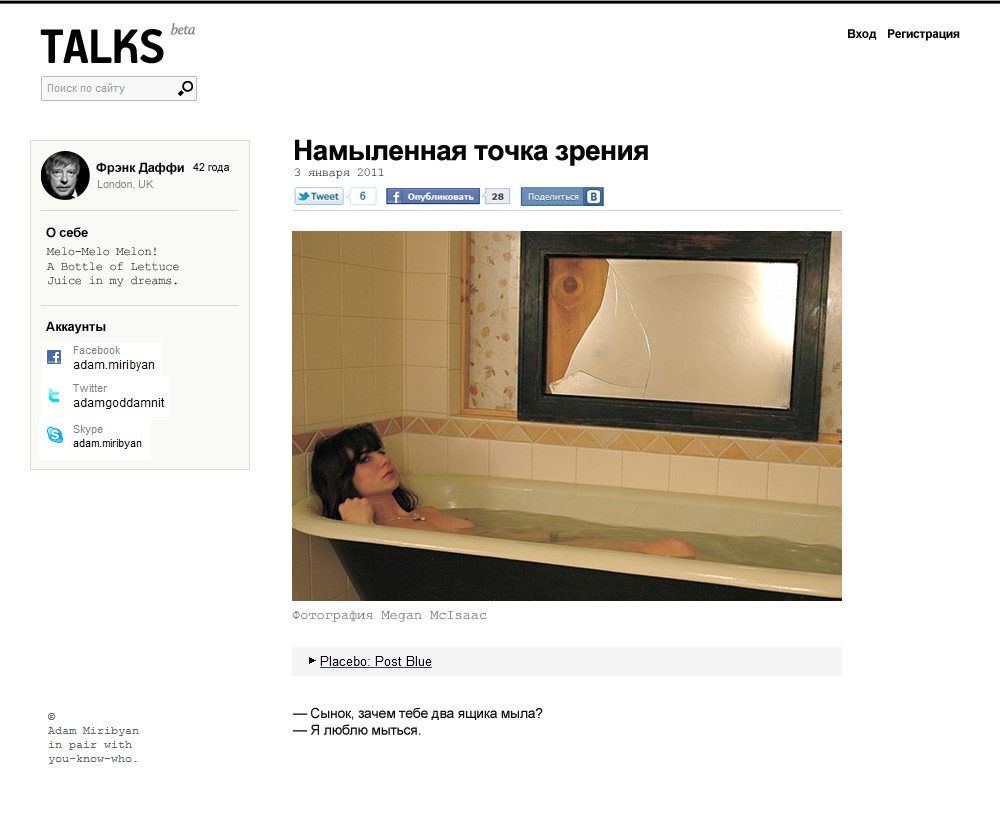
<style>
.page{position:relative;width:1000px;height:814px;background:#ffffff}
.page>*{position:absolute;margin:0}
.t1{font:54.1px "PFHandbookPro-Bold";letter-spacing:-0.02em;color:#010101}
.t2{font:15.1px "Calluna-It";letter-spacing:-0.02em;color:#888888}
.t3{font:12px "Arial-BoldMT";letter-spacing:-0.02em;color:#000000}
.t4{font:28px "Arial-BoldMT";letter-spacing:-0.02em;color:#060606}
.t5{font:13px "Arial-BoldMT";letter-spacing:-0.02em;color:#060606}
.t6{font:11px "ArialMT";letter-spacing:-0.02em;color:#060606}
.t7{font:12px "CourierNewPSMT";letter-spacing:-0.02em}
.t8{font:11px "ArialMT";letter-spacing:-0.02em;color:#888888}
.t9{font:13px "Arial-BoldMT";letter-spacing:-0.02em;color:#000000}
.t10{font:12px "CourierNewPSMT";letter-spacing:-0.02em;color:#000000}
.t11{font:14px "CourierNewPSMT";letter-spacing:-0.02em;color:#888888}
.t12{font:14px "ArialMT";letter-spacing:-0.02em;color:#070707}
</style>
<div class="page">
<p class="t1" style="left:40px;top:29px;width:124px;height:35px">TALKS</p>
<p class="t2" style="left:171px;top:23px;width:24px;height:12px">beta</p>
<p class="t3" style="left:848px;top:29px;width:29px;height:11px">Вход</p>
<p class="t3" style="left:888px;top:29px;width:72px;height:12px">Регистрация</p>
<p class="t4" style="left:295px;top:139px;width:353px;height:27px">Намыленная точка зрения</p>
<p class="t5" style="left:96px;top:162px;width:88px;height:13px">Фрэнк Даффи</p>
<p class="t6" style="left:193px;top:163px;width:36px;height:10px">42 года</p>
<p class="t7" style="left:295px;top:168px;width:89px;height:11px">3 января 2011</p>
<p class="t8" style="left:98px;top:180px;width:56px;height:10px">London, UK</p>
<p class="t9" style="left:46px;top:227px;width:42px;height:11px">О себе</p>
<p class="t10" style="left:46px;top:247px;width:133px;height:40px">Melo-Melo Melon!<br>A Bottle of Lettuce Juice in my dreams.</p>
<p class="t9" style="left:46px;top:321px;width:60px;height:13px">Аккаунты</p>
<p class="t11" style="left:292px;top:610px;width:195px;height:12px">Фотография Megan McIsaac</p>
<p class="t12" style="left:293px;top:707px;width:250px;height:28px">— Сынок, зачем тебе два ящика мыла?<br>— Я люблю мыться.</p>
</div>
